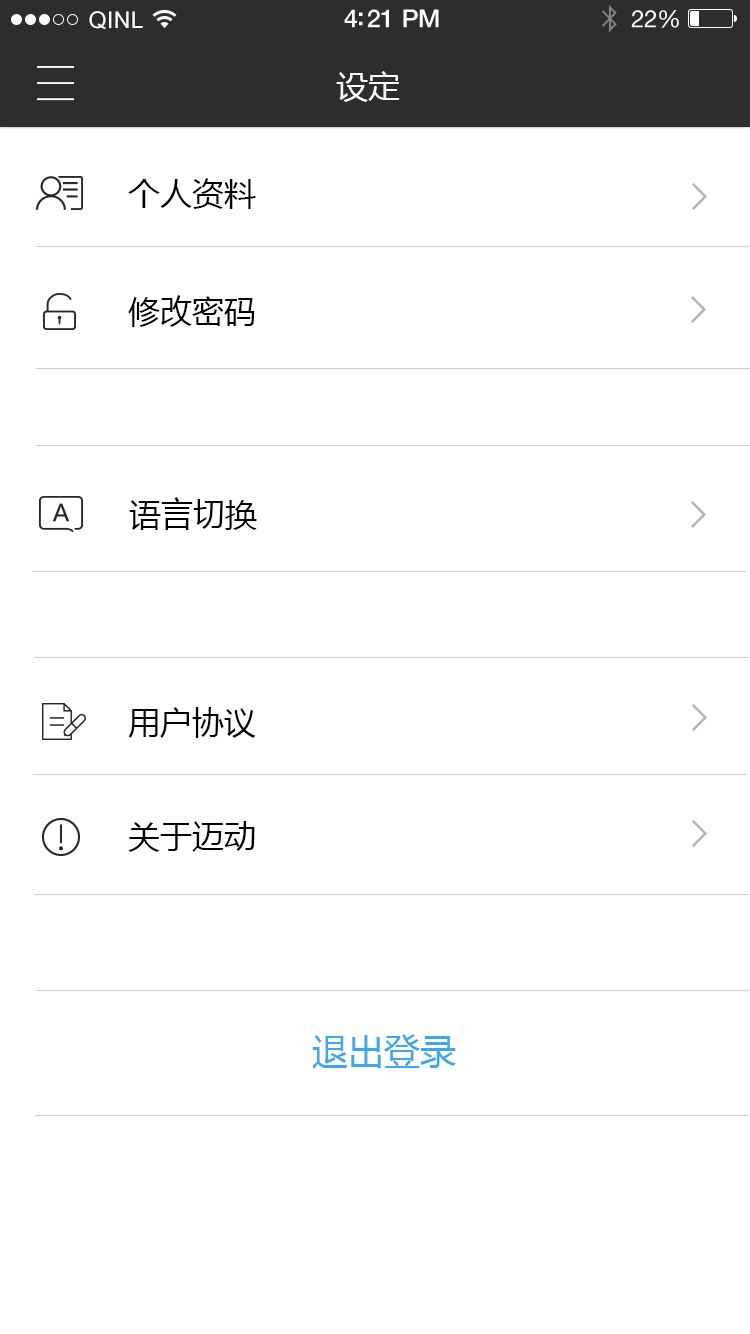
<style>
.page{position:relative;width:750px;height:1334px;background:#ffffff}
.page>*{position:absolute;margin:0}
.t1{font:23px "ArialUnicodeMS";letter-spacing:0.02em;color:#ffffff}
.t2{font:25px "HelveticaNeue-Medium";letter-spacing:-0.02em;color:#ffffff}
.t3{font:24px "HelveticaNeue";letter-spacing:-0.02em;color:#ffffff}
.t4{font:32px "MicrosoftYaHei";color:#ffffff}
.t5{font:32px "MicrosoftYaHei";color:#000000}
.t6{font:36px "MicrosoftYaHei";color:#3da7ea}
</style>
<div class="page">
<p class="t1" style="left:89px;top:11px;width:54px;height:19px">QINL</p>
<p class="t2" style="left:344px;top:9px;width:95px;height:19px">4:21 PM</p>
<p class="t3" style="left:631px;top:10px;width:48px;height:18px">22%</p>
<p class="t4" style="left:336px;top:71px;width:64px;height:31px">设定</p>
<p class="t5" style="left:128px;top:178px;width:128px;height:31px">个人资料</p>
<p class="t5" style="left:128px;top:295px;width:127px;height:32px">修改密码</p>
<p class="t5" style="left:129px;top:497px;width:128px;height:33px">语言切换</p>
<p class="t5" style="left:128px;top:707px;width:128px;height:31px">用户协议</p>
<p class="t5" style="left:128px;top:821px;width:127px;height:31px">关于迈动</p>
<p class="t6" style="left:312px;top:1034px;width:144px;height:35px">退出登录</p>
</div>
